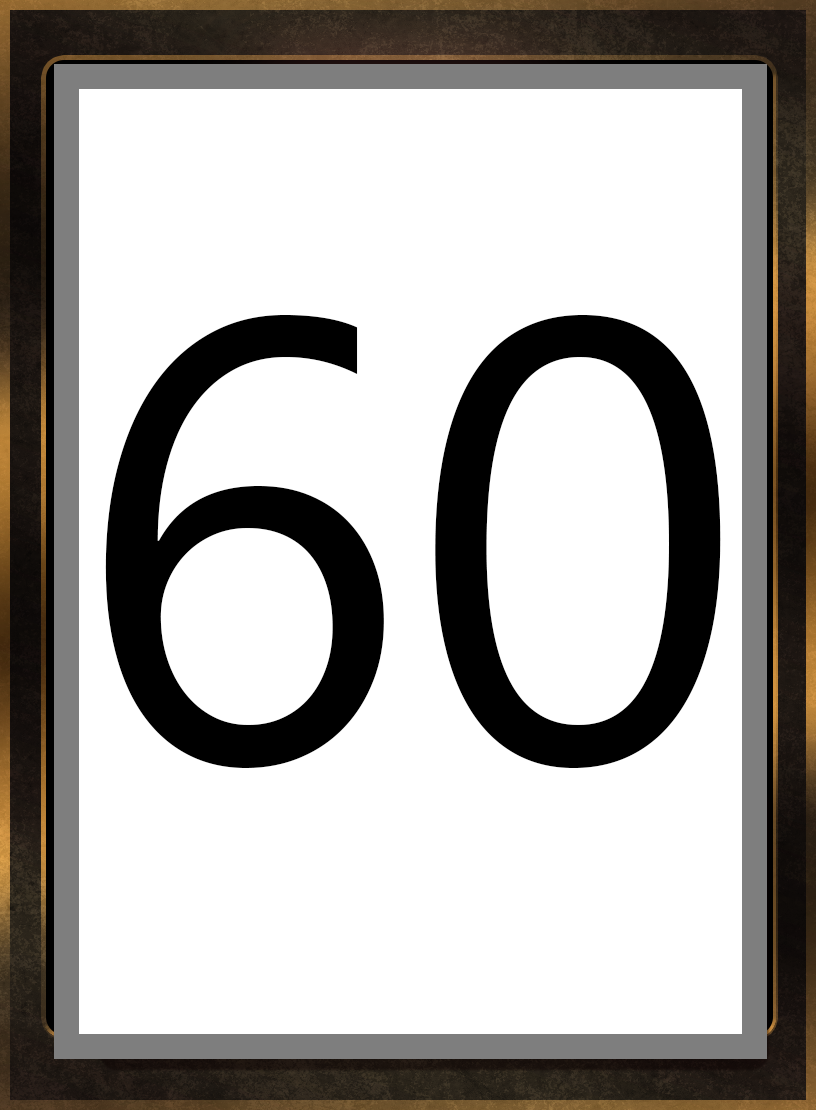
<style>
.page{position:relative;width:816px;height:1110px;background:#ffffff}
.page>*{position:absolute;margin:0}
.t1{font:625px "Ebrima";color:#000000}
</style>
<div class="page">
<p class="t1" style="left:105px;top:315px;width:616px;height:453px">60</p>
</div>
